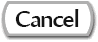
<style>
.page{position:relative;width:98px;height:42px;background:#ffffff}
.page>*{position:absolute;margin:0}
.t1{font:24px "AmiraParadiso";letter-spacing:-0.05em;color:#000000}
</style>
<div class="page">
<p class="t1" style="left:15px;top:9px;width:64px;height:18px;opacity:0.96">Cancel</p>
</div>
